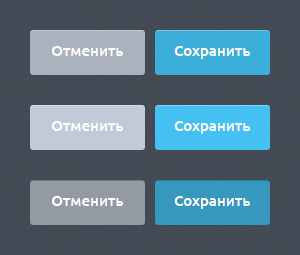
<style>
.page{position:relative;width:300px;height:255px}
.page>*{position:absolute;margin:0}
.t1{font:15px "Ubuntu-Medium";color:#ffffff}
</style>
<div class="page">
<p class="t1" style="left:52px;top:46px;width:71px;height:10px">Отменить</p>
<p class="t1" style="left:174px;top:46px;width:76px;height:13px">Сохранить</p>
<p class="t1" style="left:52px;top:121px;width:71px;height:10px">Отменить</p>
<p class="t1" style="left:174px;top:121px;width:76px;height:13px">Сохранить</p>
<p class="t1" style="left:52px;top:196px;width:71px;height:10px">Отменить</p>
<p class="t1" style="left:174px;top:196px;width:76px;height:13px">Сохранить</p>
</div>
